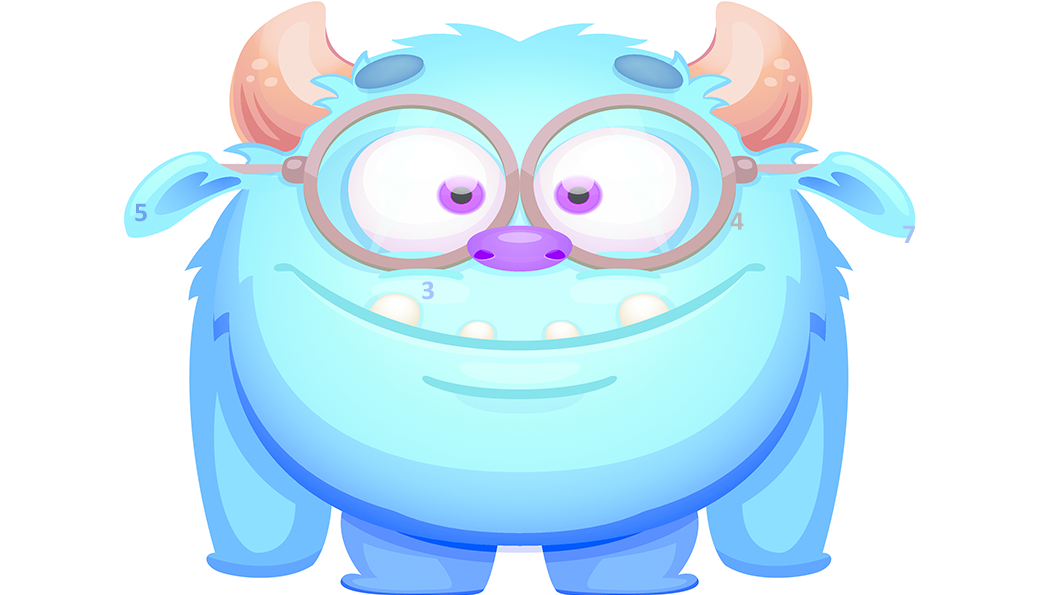
<style>
.page{position:relative;width:1041px;height:595px;background:#ffffff}
.page>*{position:absolute;margin:0}
.t1{font:27.2px "Calibri-Bold";letter-spacing:0.1em;color:#6fa1ec}
.t2{font:27.2px "Calibri-Bold";letter-spacing:0.1em;color:#b7b7b7}
.t3{font:27.2px "Calibri-Bold";letter-spacing:0.1em;color:#a4c2f4}
.t4{font:27.2px "Calibri-Bold";letter-spacing:0.1em;color:#a4c2fe}
</style>
<div class="page">
<p class="t1" style="left:135px;top:203px;width:12px;height:19px">5</p>
<p class="t2" style="left:730px;top:212px;width:14px;height:18px">4</p>
<p class="t3" style="left:903px;top:225px;width:12px;height:18px">7</p>
<p class="t4" style="left:422px;top:281px;width:12px;height:19px">3</p>
</div>
